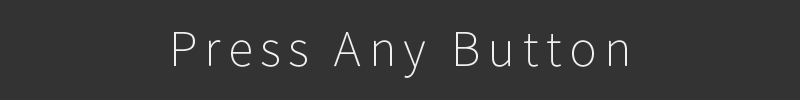
<style>
.page{position:relative;width:800px;height:100px;background:#333333}
.page>*{position:absolute;margin:0}
.t1{font:47px "SourceHanSansJP-ExtraLight";letter-spacing:0.16em;color:#f0f0f0}
</style>
<div class="page">
<p class="t1" style="left:174px;top:32px;width:453px;height:46px">Press Any Button</p>
</div>
